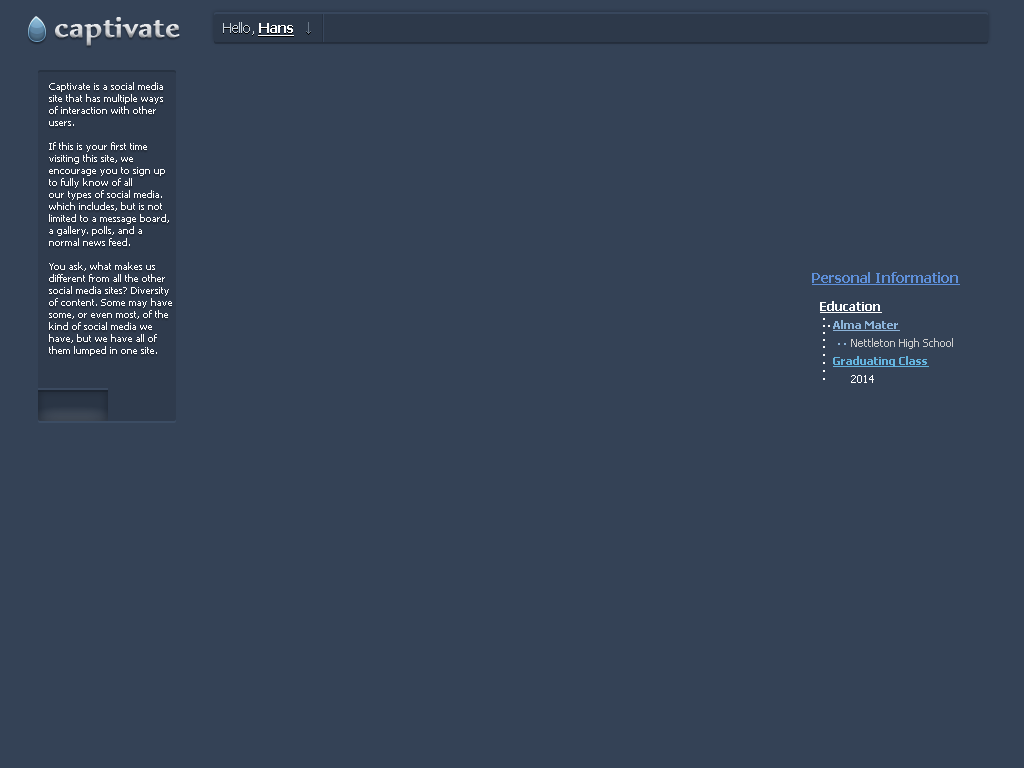
<style>
.page{position:relative;width:1024px;height:768px;background:#344256}
.page>*{position:absolute;margin:0}
.t1{font:14px "Tahoma";color:#ccd6de}
.t2{font:14px "Tahoma-Bold";color:#ffffff;text-decoration:underline}
.t3{font:10px "Tahoma";color:#ffffff}
</style>
<div class="page">
<p class="t1" style="left:223px;top:22px;width:71px;height:14px">Hello, <span class="t2">Hans</span></p>
<p class="t3" style="left:49px;top:82px;width:123px;height:274px">Captivate is a social media<br>site that has multiple ways<br>of interaction with other<br>users.<br><br>If this is your first time<br>visiting this site, we<br>encourage you to sign up<br>to fully know of all<br>our types of social media.<br>which includes, but is not<br>limited to a message board,<br>a gallery. polls, and a <br>normal news feed.<br><br>You ask, what makes us<br>different from all the other<br>social media sites? Diversity<br>of content. Some may have<br>some, or even most, of the<br>kind of social media we<br>have, but we have all of<br>them lumped in one site.</p>
</div>
